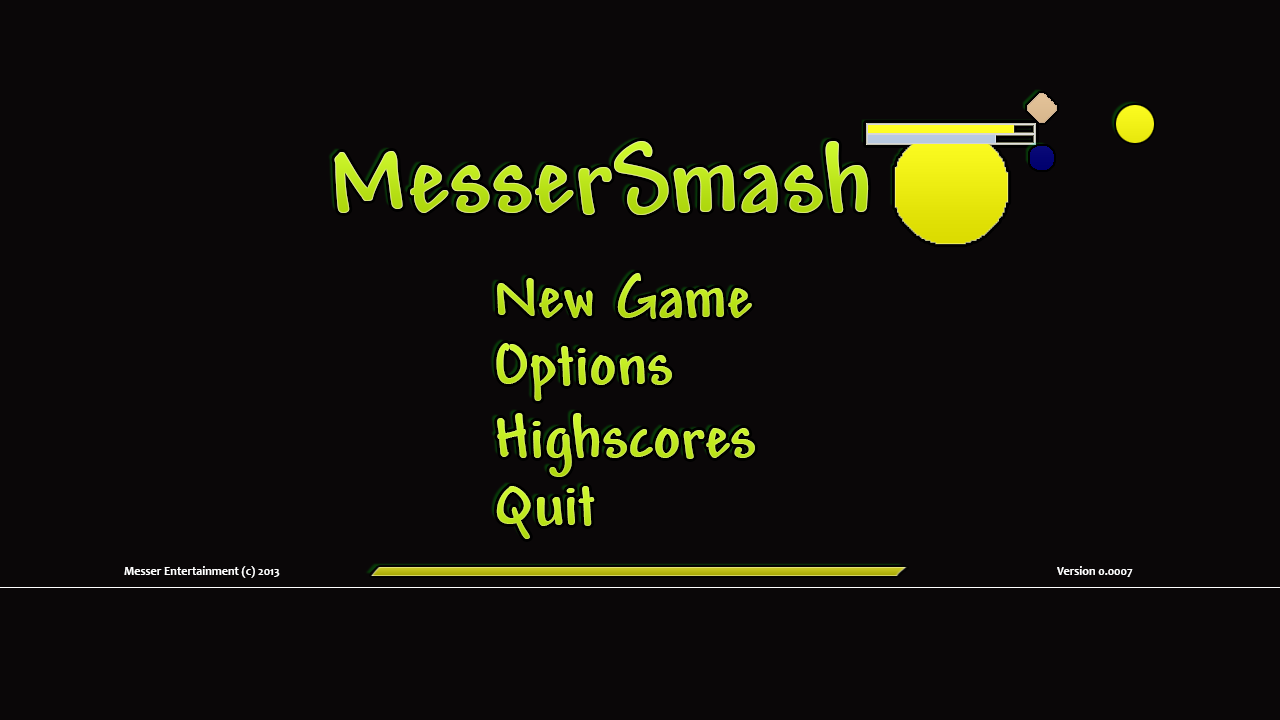
<style>
.page{position:relative;width:1280px;height:720px;background:#0a0708}
.page>*{position:absolute;margin:0}
.t1{font:104px "Andy-Bold";color:#bde51d}
.t2{font:64px "Andy-Bold";color:#bde41f}
.t3{font:64px "Andy-Bold";color:#c5eb26}
.t4{font:64px "Andy-Bold";color:#c4eb25}
.t5{font:64px "Andy-Bold";color:#c5eb27}
.t6{font:12px "Candara-Bold";color:#ffffff}
</style>
<div class="page">
<p class="t1" style="left:334px;top:141px;width:535px;height:74px">MesserSmash</p>
<p class="t2" style="left:497px;top:273px;width:255px;height:46px">New Game</p>
<p class="t3" style="left:496px;top:343px;width:176px;height:58px">Options</p>
<p class="t4" style="left:497px;top:413px;width:258px;height:64px">Highscores</p>
<p class="t5" style="left:496px;top:486px;width:99px;height:53px">Quit</p>
<p class="t6" style="left:124px;top:566px;width:156px;height:12px">Messer Entertainment (c) 2013</p>
<p class="t6" style="left:1057px;top:566px;width:76px;height:11px">Version 0.0007</p>
</div>
